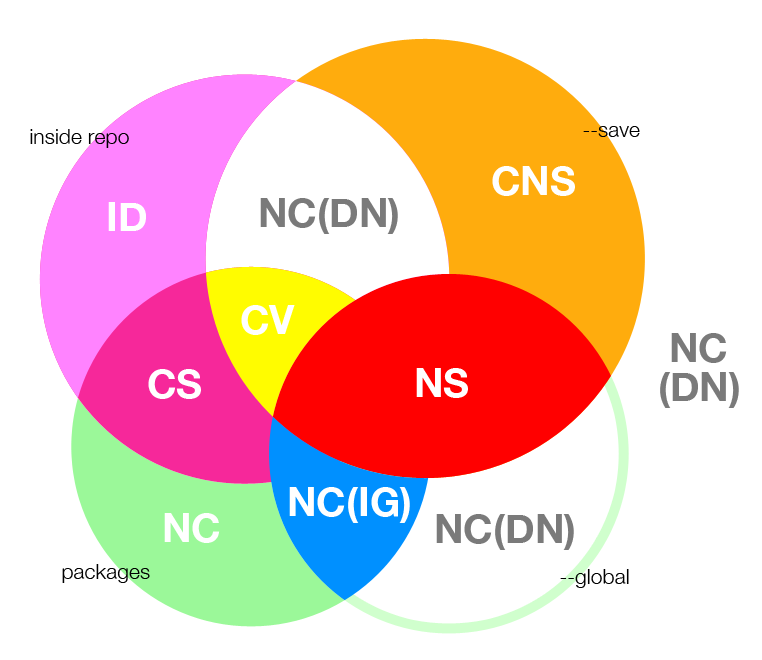
<style>
.page{position:relative;width:762px;height:660px;background:#ffffff}
.page>*{position:absolute;margin:0}
.t1{font:21.2px "HelveticaNeue-Light";color:#000000}
.t2{font:40px "HelveticaNeue-Bold";color:#ffffff}
.t3{font:40px "HelveticaNeue-Bold";color:#7a7a7a}
</style>
<div class="page">
<p class="t1" style="left:583px;top:126px;width:57px;height:11px">--save</p>
<p class="t1" style="left:30px;top:129px;width:99px;height:19px">inside repo</p>
<p class="t2" style="left:492px;top:166px;width:83px;height:30px">CNS</p>
<p class="t3" style="left:260px;top:198px;width:138px;height:36px">NC(DN)</p>
<p class="t2" style="left:108px;top:202px;width:38px;height:29px">ID</p>
<p class="t2" style="left:241px;top:305px;width:54px;height:30px">CV</p>
<p class="t3" style="left:671px;top:333px;width:56px;height:30px">NC</p>
<p class="t2" style="left:148px;top:369px;width:53px;height:30px">CS</p>
<p class="t2" style="left:416px;top:368px;width:52px;height:30px">NS</p>
<p class="t3" style="left:660px;top:372px;width:79px;height:36px">(DN)</p>
<p class="t2" style="left:289px;top:487px;width:121px;height:36px">NC(IG)</p>
<p class="t2" style="left:164px;top:513px;width:56px;height:30px">NC</p>
<p class="t3" style="left:436px;top:514px;width:138px;height:36px">NC(DN)</p>
<p class="t1" style="left:62px;top:564px;width:88px;height:19px">packages</p>
<p class="t1" style="left:560px;top:569px;width:69px;height:19px">--global</p>
</div>
